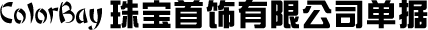
<style>
.page{position:relative;width:428px;height:30px;background:#000000}
.page>*{position:absolute;margin:0}
.t1{font:29.2px "SingYiEG-Ultra-GB";letter-spacing:0.1em;color:#000000}
.t2{font:29.2px "FZZBHJW--GB1-0";color:#000000}
</style>
<div class="page">
<p class="t1" style="left:0px;top:0px;width:428px;height:30px"><span class="t2">ColorBay </span>珠宝首饰有限公司单据</p>
</div>
